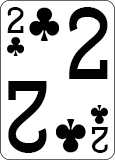
<style>
.page{position:relative;width:115px;height:160px;background:#ffffff}
.page>*{position:absolute;margin:0}
.t1{font:31.1px "CardCharacters";color:#020201;scale:0.95 1}
.t2{font:86.4px "CardCharacters";color:#020201;scale:0.83 1}
</style>
<div class="page">
<p class="t1" style="left:7px;top:7px;width:17px;height:26px">2</p>
<p class="t2" style="left:69px;top:7px;width:39px;height:72px">2</p>
<p class="t2" style="left:8px;top:81px;width:39px;height:72px;rotate:180deg">2</p>
<p class="t1" style="left:92px;top:127px;width:16px;height:26px;rotate:180deg">2</p>
</div>
